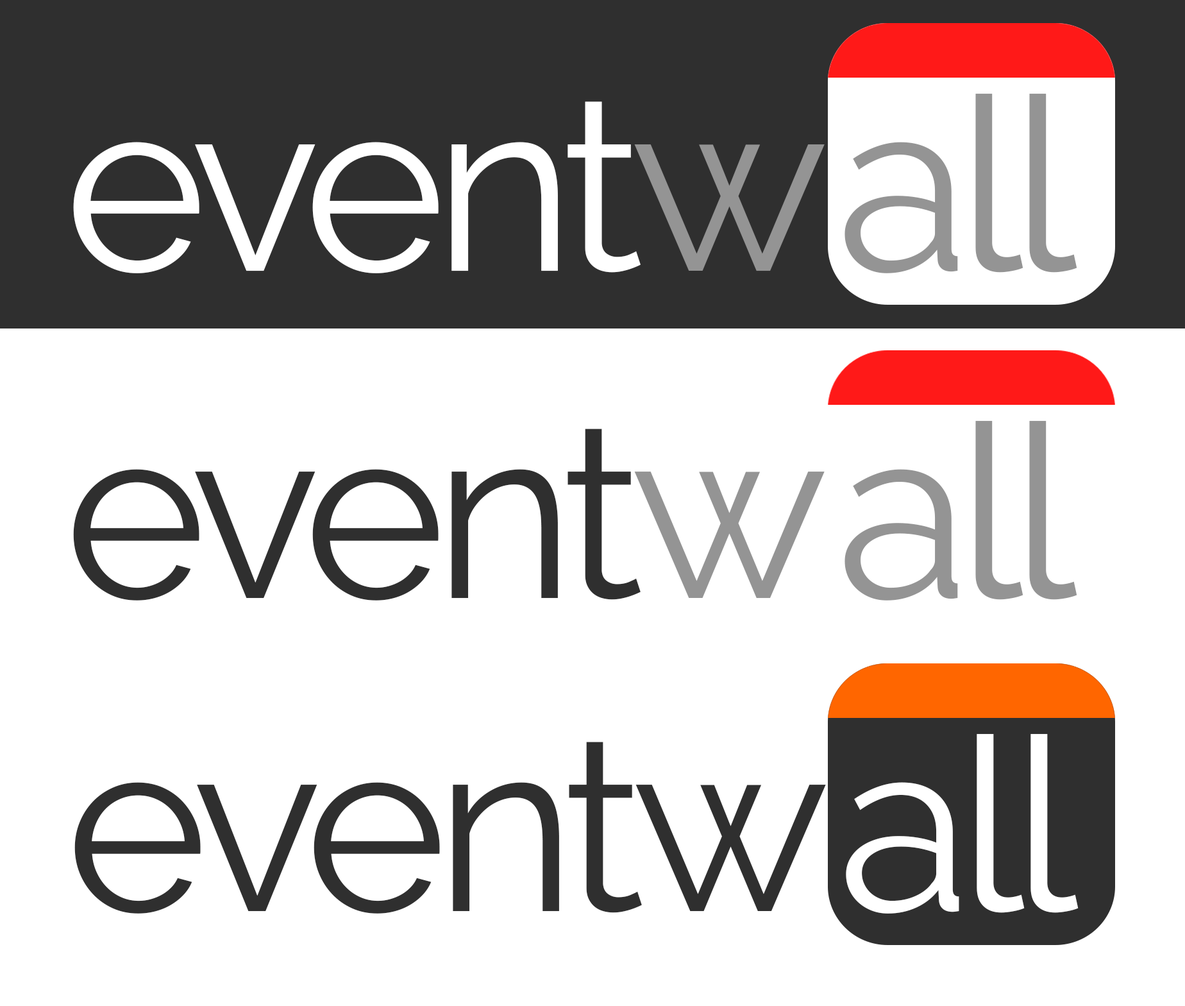
<style>
.page{position:relative;width:1185px;height:1006px;background:#ffffff}
.page>*{position:absolute;margin:0}
.t1{font:242.6px "Raleway-Regular";letter-spacing:-0.05em;color:#ffffff}
.t2{font:242.6px "Raleway-Regular";letter-spacing:0.05em;color:#949494}
.t3{font:242.6px "Raleway-Regular";letter-spacing:-0.05em;color:#949494}
.t4{font:242.6px "Raleway-Regular";letter-spacing:-0.05em;color:#2f2f2f}
.t5{font:242.6px "Raleway-Regular";letter-spacing:0.05em;color:#2f2f2f}
</style>
<div class="page">
<p class="t1" style="left:73px;top:94px;width:1005px;height:179px">event<span class="t2">w</span><span class="t3">all</span></p>
<p class="t4" style="left:73px;top:421px;width:1005px;height:179px">event<span class="t2">w</span><span class="t3">all</span></p>
<p class="t4" style="left:74px;top:734px;width:1005px;height:179px">event<span class="t5">w</span><span class="t1">all</span></p>
</div>
